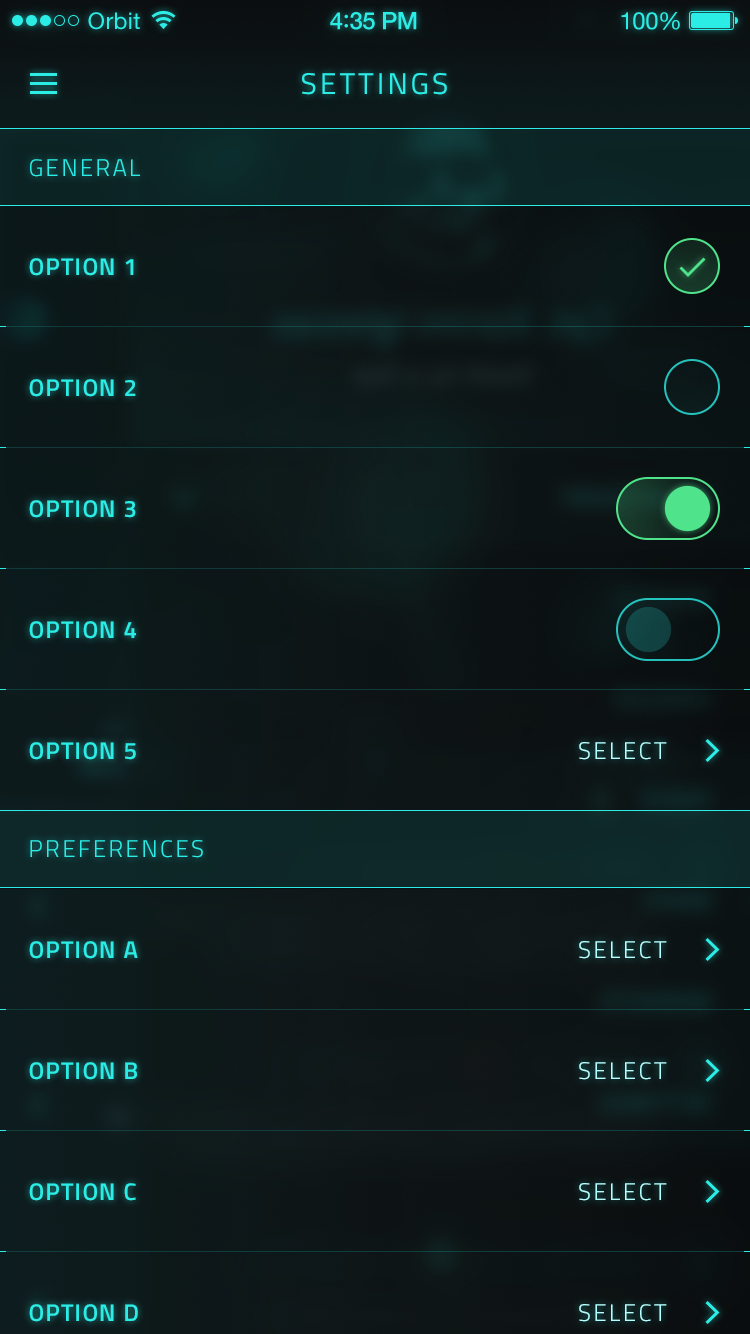
<style>
.page{position:relative;width:750px;height:1334px}
.page>*{position:absolute;margin:0}
.t1{font:23px "HelveticaNeue";letter-spacing:0.02em;color:#2bede6}
.t2{font:24px "HelveticaNeue-Medium";letter-spacing:-0.02em;color:#2bede6}
.t3{font:26px "Avenir-Medium";letter-spacing:-0.02em;color:#2bede6}
.t4{font:24px "HelveticaNeue";letter-spacing:-0.02em;color:#2bede6}
.t5{font:30px "Titillium-Regular";letter-spacing:0.1em;color:#2bede6;text-transform:uppercase}
.t6{font:24px "Titillium-Light";letter-spacing:0.1em;color:#2bede6;text-transform:uppercase}
.t7{font:24px "Titillium-Semibold";letter-spacing:0.05em;color:#2bede6;text-transform:uppercase}
.t8{font:24px "Titillium-Light";letter-spacing:0.1em;color:#b5ffff;text-transform:uppercase}
</style>
<div class="page">
<p class="t1" style="left:88px;top:12px;width:52px;height:18px">Orbit</p>
<p class="t2" style="left:330px;top:12px;width:87px;height:18px">4<span class="t3">:</span>35 PM</p>
<p class="t4" style="left:621px;top:12px;width:59px;height:18px">100%</p>
<p class="t5" style="left:302px;top:73px;width:145px;height:22px">Settings</p>
<p class="t6" style="left:30px;top:159px;width:110px;height:18px">General</p>
<p class="t7" style="left:29px;top:258px;width:105px;height:18px">Option 1</p>
<p class="t7" style="left:29px;top:379px;width:107px;height:18px">Option 2</p>
<p class="t7" style="left:29px;top:500px;width:107px;height:18px">Option 3</p>
<p class="t7" style="left:29px;top:621px;width:107px;height:18px">Option 4</p>
<p class="t7" style="left:29px;top:742px;width:107px;height:18px">Option 5</p>
<p class="t8" style="left:579px;top:742px;width:88px;height:18px">Select</p>
<p class="t6" style="left:30px;top:840px;width:173px;height:18px">PREFERENCES</p>
<p class="t7" style="left:29px;top:941px;width:109px;height:18px">Option A</p>
<p class="t8" style="left:579px;top:941px;width:88px;height:18px">Select</p>
<p class="t7" style="left:29px;top:1062px;width:108px;height:18px">Option B</p>
<p class="t8" style="left:579px;top:1062px;width:88px;height:18px">Select</p>
<p class="t7" style="left:29px;top:1183px;width:107px;height:18px">Option C</p>
<p class="t8" style="left:579px;top:1183px;width:88px;height:18px">Select</p>
<p class="t7" style="left:29px;top:1304px;width:109px;height:18px">Option D</p>
<p class="t8" style="left:579px;top:1304px;width:88px;height:18px">Select</p>
</div>
